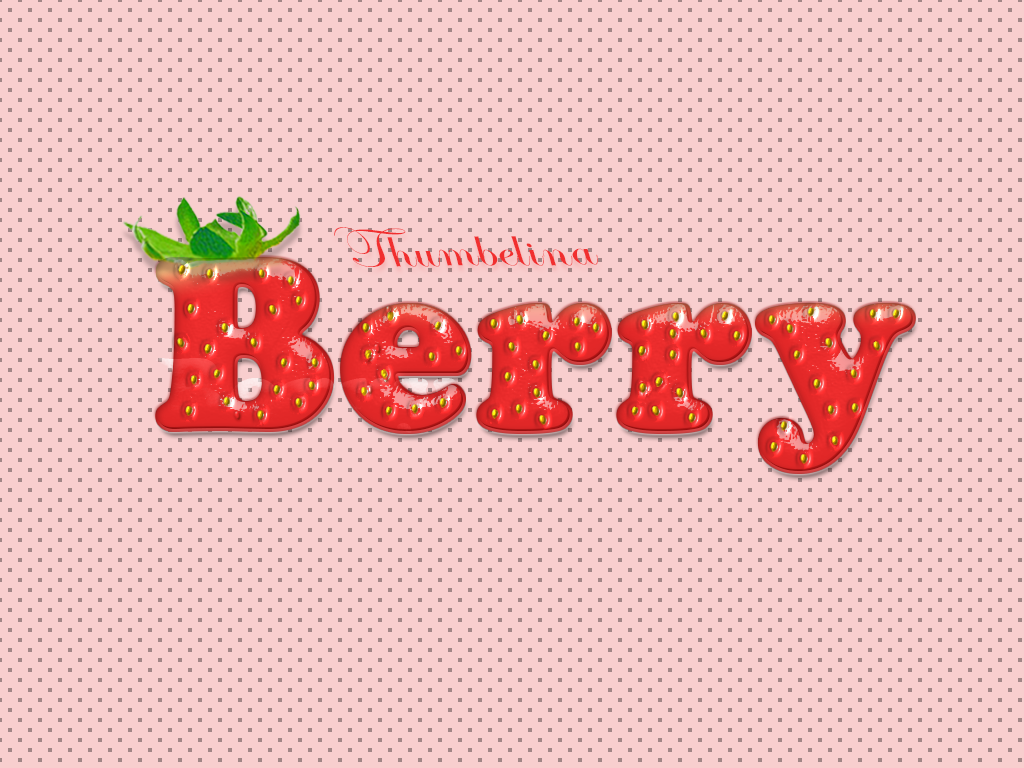
<style>
.page{position:relative;width:1024px;height:768px;background:#f8cece}
.page>*{position:absolute;margin:0}
.t1{font:83px "EdwardianScriptITC";letter-spacing:0.02em;color:#f12f2f;scale:0.84 1}
.t2{font:250px "CooperBlack";letter-spacing:0.02em}
</style>
<div class="page">
<p class="t1" style="left:334px;top:227px;width:264px;height:40px">Thumbelina</p>
<p class="t2" style="left:156px;top:258px;width:755px;height:211px">Berry</p>
<p class="t2" style="left:158px;top:260px;width:755px;height:211px">Berry</p>
</div>
